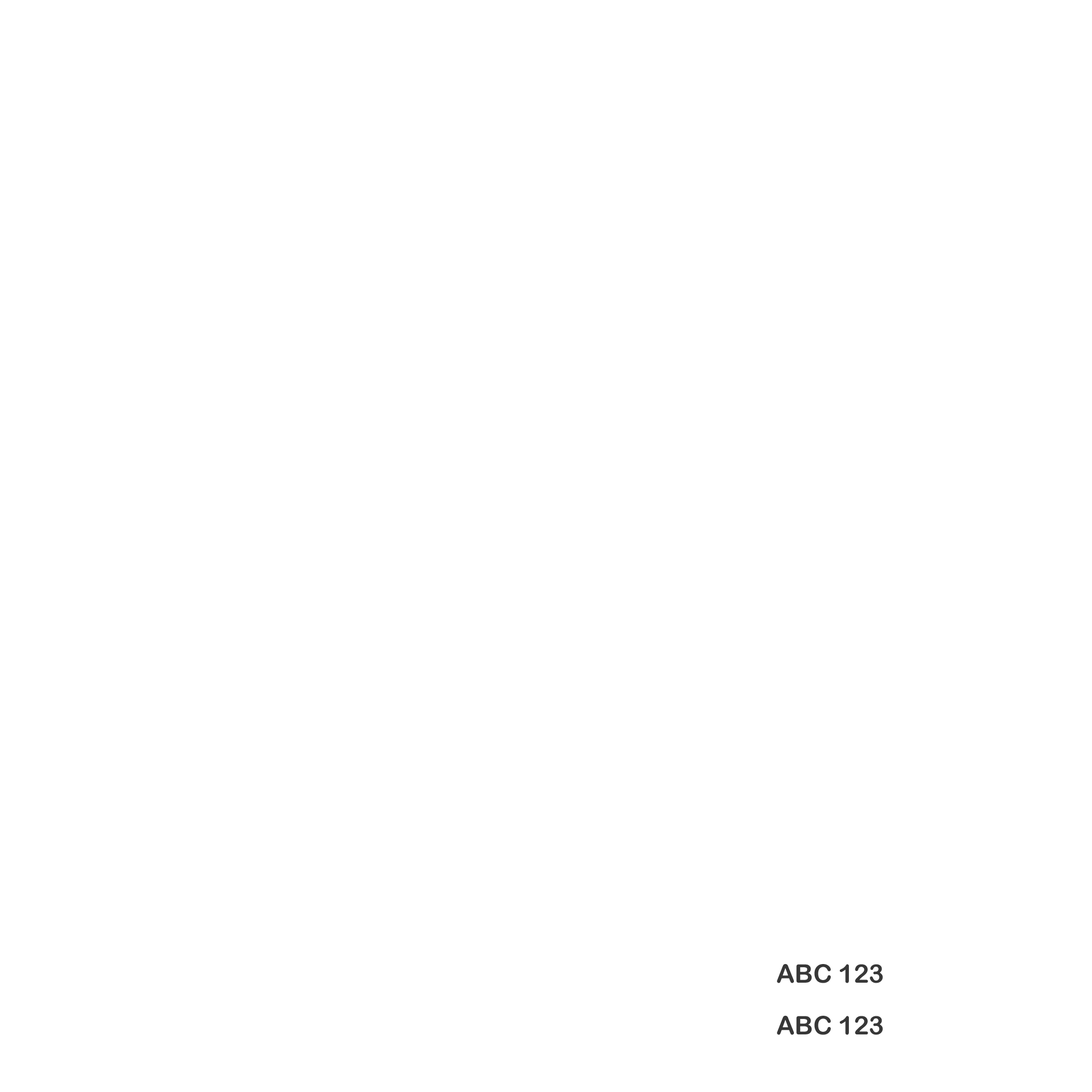
<style>
.page{position:relative;width:1092px;height:1092px;background:#ffffff}
.page>*{position:absolute;margin:0}
.t1{font:25.6px "ArialRoundedMTBold";color:#373737}
</style>
<div class="page">
<p class="t1" style="left:777px;top:964px;width:106px;height:19px">ABC 123</p>
<p class="t1" style="left:777px;top:1016px;width:106px;height:19px">ABC 123</p>
</div>
